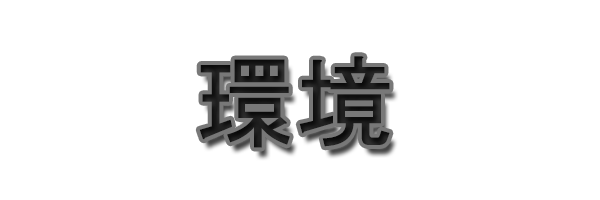
<style>
.page{position:relative;width:600px;height:200px;background:#ffffff}
.page>*{position:absolute;margin:0}
.t1{font:100px "MS-Gothic";color:#191919}
</style>
<div class="page">
<p class="t1" style="left:199px;top:56px;width:191px;height:92px">環境</p>
</div>
